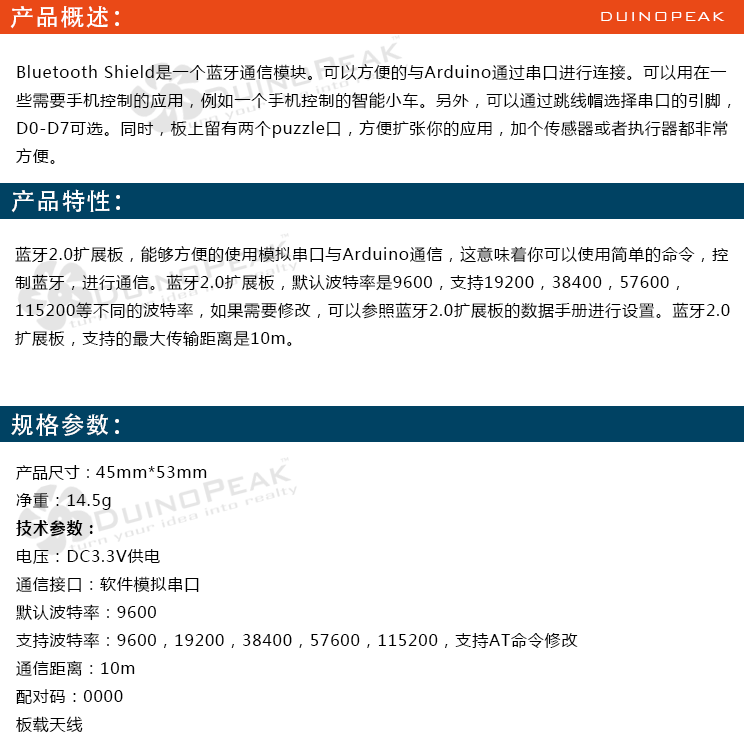
<style>
.page{position:relative;width:744px;height:746px;background:#ffffff}
.page>*{position:absolute;margin:0}
.t1{font:24px "AdobeHeitiStd-Regular";letter-spacing:0.05em;color:#ffffff}
.t2{font:18px "BankGothicBT-Light";letter-spacing:0.05em;color:#ffffff}
.t3{font:16px "MicrosoftYaHei";letter-spacing:0.05em;color:#000000}
.t4{font:16px "MicrosoftYaHei";color:#000000}
.t5{font:16px "MicrosoftYaHei-Bold";letter-spacing:0.05em;color:#000000}
</style>
<div class="page">
<p class="t1" style="left:10px;top:6px;width:109px;height:23px">产品概述：</p>
<p class="t2" style="left:601px;top:12px;width:124px;height:9px">DUINOPEAK</p>
<p class="t3" style="left:16px;top:64px;width:715px;height:100px">Bluetooth Shield是一个蓝牙通信模块。可以方便的与Arduino通过串口进行连接。可以用在一<br>些需要手机控制的应用，例如一个手机控制的智能小车。另外，可以通过跳线帽选择串口的引脚，<br>D0-D7可选。同时，板上留有两个puzzle口，方便扩张你的应用，加个传感器或者执行器都非常<br>方便。</p>
<p class="t1" style="left:11px;top:189px;width:109px;height:24px">产品特性：</p>
<p class="t3" style="left:15px;top:246px;width:715px;height:101px">蓝牙2.0扩展板，能够方便的使用模拟串口与Arduino通信，这意味着你可以使用简单的命令，控<br>制蓝牙，进行通信。蓝牙2.0扩展板，默认波特率是9600，支持19200，38400，57600，<br>115200等不同的波特率，如果需要修改，可以参照蓝牙2.0扩展板的数据手册进行设置。蓝牙2.0<br>扩展板，支持的最大传输距离是10m。</p>
<p class="t1" style="left:11px;top:413px;width:108px;height:23px">规格参数：</p>
<p class="t3" style="left:16px;top:465px;width:562px;height:268px"><span class="t4">产品尺寸：</span>45mm*53mm<br>净重：14.5g<br><span class="t5">技术参数：<br></span>电压：DC3.3V供电<br>通信接口：软件模拟串口<br>默认波特率：9600<br>支持波特率：9600，19200，38400，57600，115200，支持AT命令修改<br>通信距离：10m<br>配对码：0000<br>板载天线</p>
</div>
